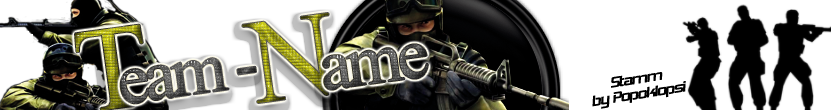
<style>
.page{position:relative;width:831px;height:110px;background:#ffffff}
.page>*{position:absolute;margin:0}
.t1{font:120px "IskoolaPota";letter-spacing:-0.07em}
.t2{font:72px "IskoolaPota";letter-spacing:-0.07em}
.t3{font:18px/7.6px "HemiHead426";letter-spacing:-0.07em;color:#000000}
</style>
<div class="page">
<p class="t1" style="left:242px;top:13px;width:87px;height:90px;rotate:-8deg">N</p>
<p class="t2" style="left:120px;top:58px;width:136px;height:46px;rotate:-8deg">eam -</p>
<p class="t3" style="left:592px;top:72px;width:94px;height:37px;text-align:center;rotate:-9deg">Stamm<br><br>by Popoklopsi</p>
</div>
